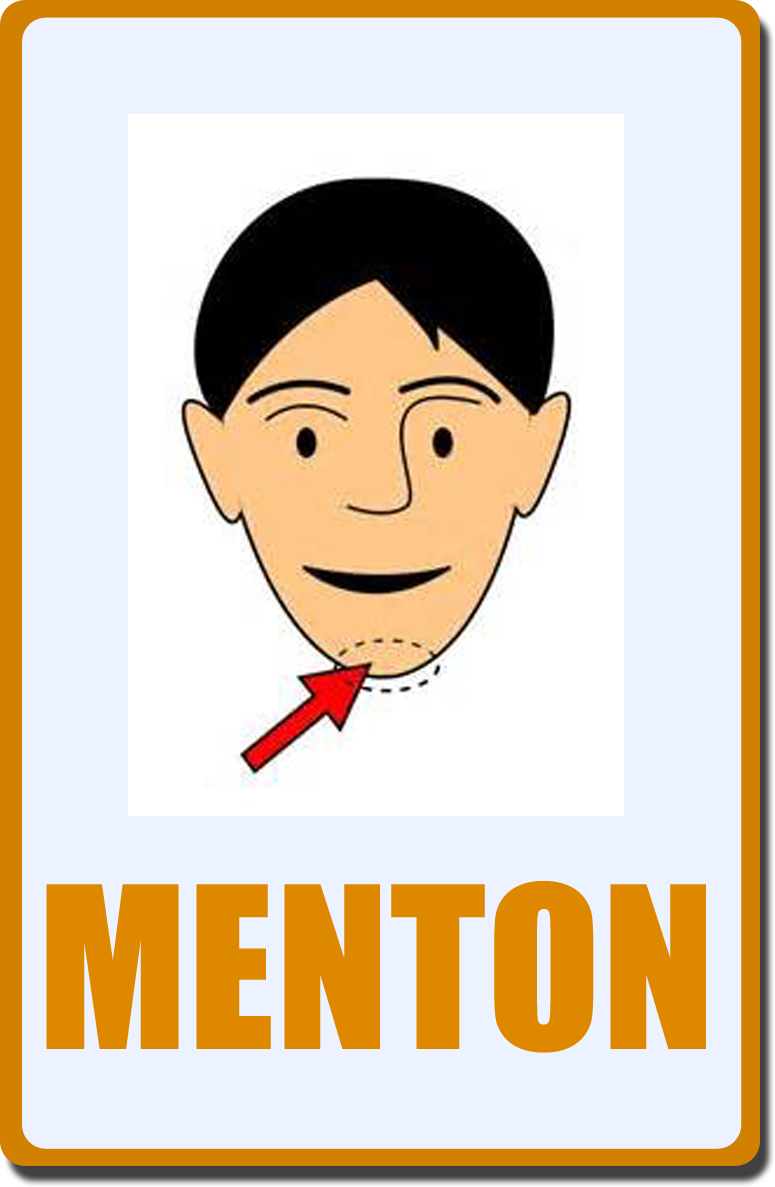
<style>
.page{position:relative;width:775px;height:1187px;background:#ecf2ff}
.page>*{position:absolute;margin:0}
.t1{font:208.3px "Impact";letter-spacing:0.005em;color:#de8800}
</style>
<div class="page">
<p class="t1" style="left:46px;top:881px;width:660px;height:172px">MENTON</p>
</div>
